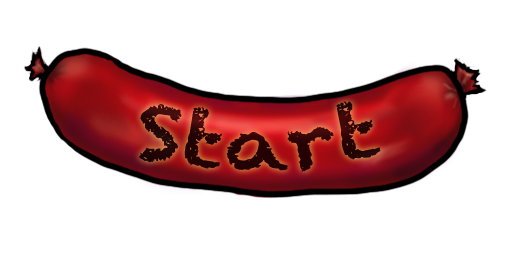
<style>
.page{position:relative;width:512px;height:256px;background:#ffffff}
.page>*{position:absolute;margin:0}
.t1{font:72px "Chalkduster";color:#240305;scale:1.2 1}
</style>
<div class="page">
<p class="t1" style="left:139px;top:101px;width:242px;height:71px">Start</p>
</div>
